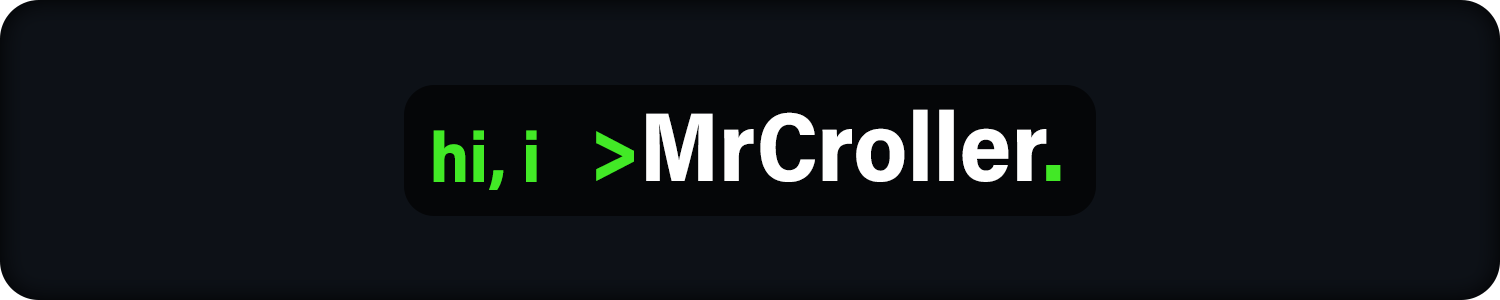
<style>
.page{position:relative;width:1500px;height:300px;background:#0d1117}
.page>*{position:absolute;margin:0}
.t1{font:98.2px "AcuminConcept_721.000wght_87.000wdth";color:#ffffff}
.t2{font:98.2px "AcuminConcept_721.000wght_87.000wdth";color:#42e926}
.t3{font:98.2px "AcuminConcept_721.000wght_87.000wdth";color:#42e826}
.t4{font:70.5px "AcuminConcept_721.000wght_87.000wdth";color:#42e926}
</style>
<div class="page">
<p class="t1" style="left:596px;top:109px;width:465px;height:73px"><span class="t2">&gt;</span>MrCroller<span class="t3">.</span></p>
<p class="t4" style="left:433px;top:130px;width:104px;height:60px">hi, i</p>
</div>
